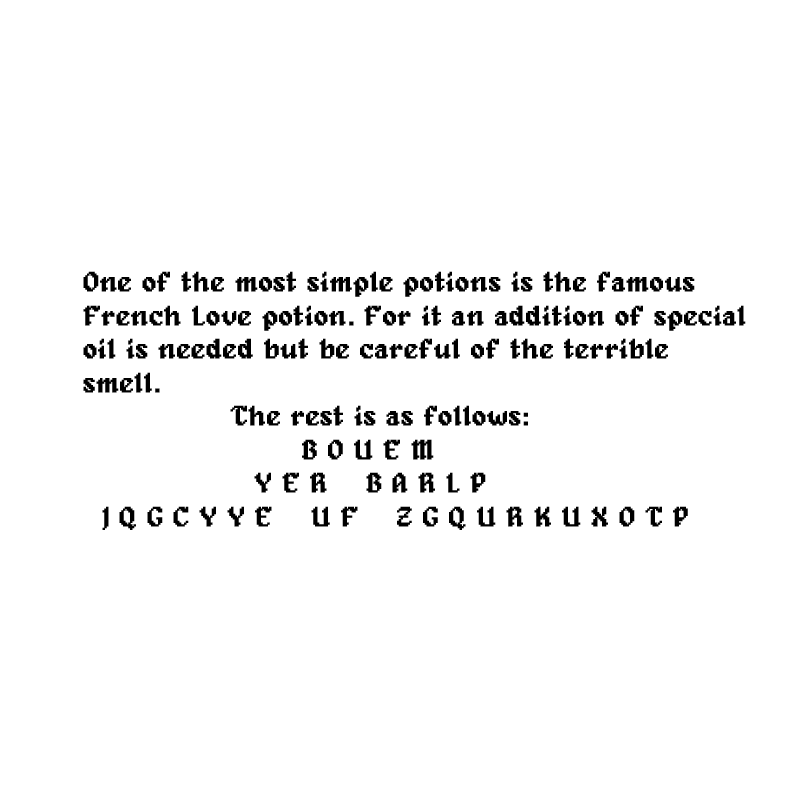
<style>
.page{position:relative;width:800px;height:800px;background:#ffffff}
.page>*{position:absolute;margin:0}
.t1{font:27.9px "Alagard";color:#000000;font-weight:bold}
</style>
<div class="page">
<p class="t1" style="left:83px;top:271px;width:663px;height:259px">One of the most simple potions is the famous<br>French Love potion. For it an addition of special<br>oil is needed but be careful of the terrible<br>smell. <br>      The rest is as follows:<br>                       B O U E M<br>                  Y E R    B A R L P<br>  J Q G C Y Y E    U F    Z G Q U R K U X O T P</p>
</div>
